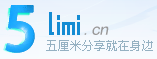
<style>
.page{position:relative;width:157px;height:59px}
.page>*{position:absolute;margin:0}
.t1{font:60px "AdobeHeitiStd-Regular";color:#1eaafe;font-weight:bold}
.t2{font:28px "BMsolidA11";color:#148cd3}
.t3{font:18px "SimHei";letter-spacing:-0.05em;color:#9a9999;font-style:italic}
.t4{font:12px "NSimSun";color:#95b1c2}
</style>
<div class="page">
<p class="t1" style="left:5px;top:5px;width:30px;height:48px">5</p>
<p class="t2" style="left:49px;top:12px;width:31px;height:23px">limi</p>
<p class="t3" style="left:84px;top:26px;width:25px;height:9px">.cn</p>
<p class="t4" style="left:46px;top:40px;width:107px;height:11px">五厘米分享就在身边</p>
</div>
